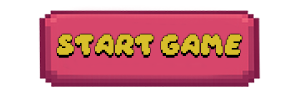
<style>
.page{position:relative;width:300px;height:100px;background:#ffffff}
.page>*{position:absolute;margin:0}
.t1{font:17.9px "DaydreamRegular";color:#d8be2b}
</style>
<div class="page">
<p class="t1" style="left:57px;top:34px;width:185px;height:21px">Start Game</p>
</div>
